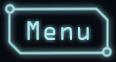
<style>
.page{position:relative;width:116px;height:62px}
.page>*{position:absolute;margin:0}
.t1{font:24px "OCRAStd";color:#a8e8ee}
</style>
<div class="page">
<p class="t1" style="left:27px;top:21px;width:62px;height:19px">Menu</p>
</div>
